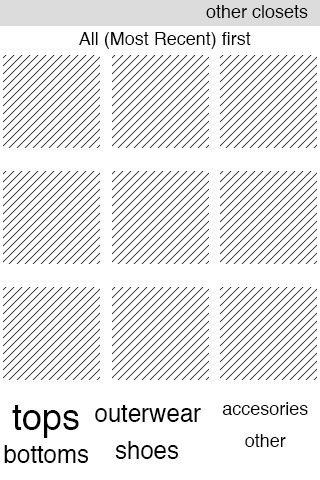
<style>
.page{position:relative;width:320px;height:480px;background:#ffffff}
.page>*{position:absolute;margin:0}
.t1{font:18px "Helvetica";color:#000000}
.t2{font:36px "Helvetica";color:#000000}
.t3{font:24px "Helvetica";color:#000000}
</style>
<div class="page">
<p class="t1" style="left:206px;top:5px;width:102px;height:13px">other closets</p>
<p class="t1" style="left:79px;top:32px;width:172px;height:17px">All (Most Recent) first</p>
<p class="t2" style="left:12px;top:405px;width:67px;height:33px">tops</p>
<p class="t3" style="left:95px;top:405px;width:106px;height:17px">outerwear</p>
<p class="t1" style="left:222px;top:402px;width:86px;height:13px">accesories</p>
<p class="t1" style="left:245px;top:434px;width:41px;height:13px">other</p>
<p class="t3" style="left:4px;top:445px;width:85px;height:18px">bottoms</p>
<p class="t3" style="left:115px;top:441px;width:64px;height:18px">shoes</p>
</div>
